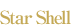
<style>
.page{position:relative;width:79px;height:27px;background:#ffffff}
.page>*{position:absolute;margin:0}
.t1{font:18px "RyuminPro-ExBold";letter-spacing:-0.08em;color:#c4a956}
</style>
<div class="page">
<p class="t1" style="left:0px;top:10px;width:71px;height:15px">Star Shell</p>
</div>
